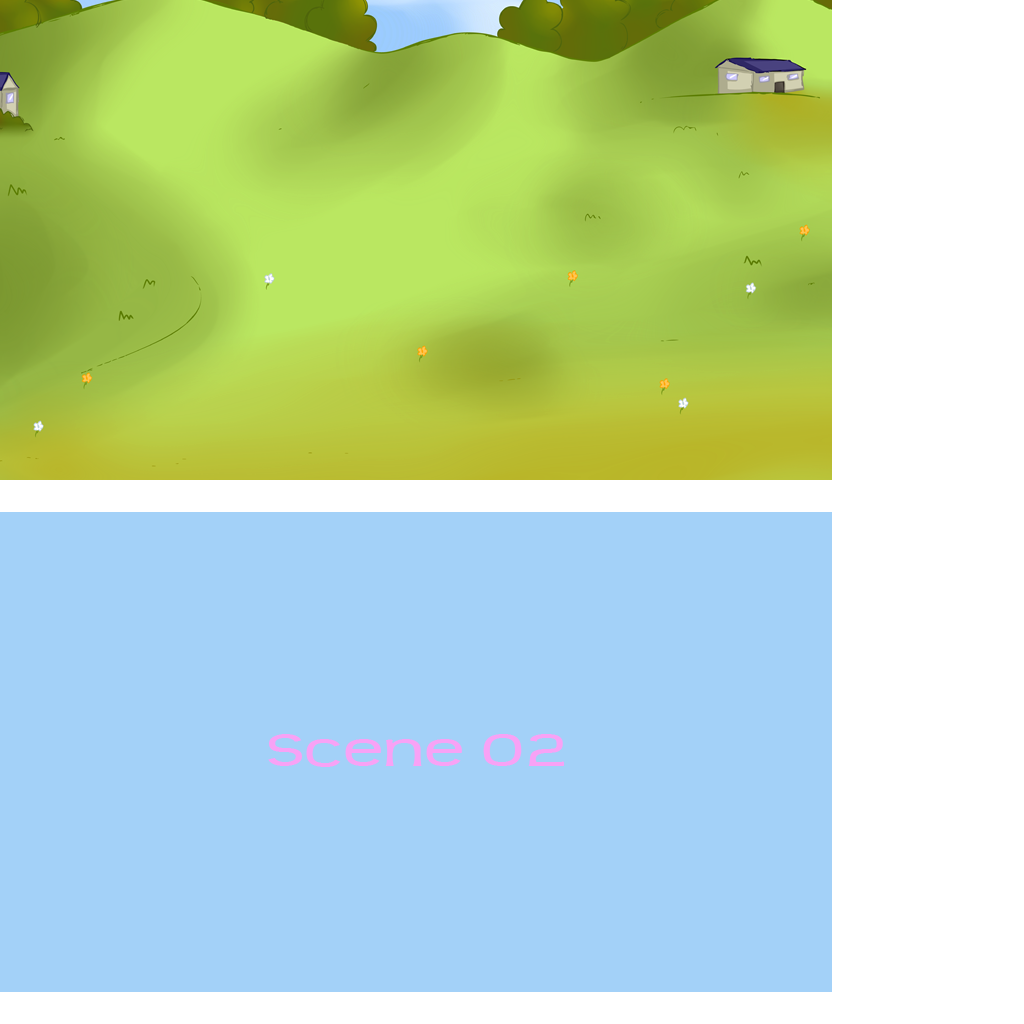
<style>
.page{position:relative;width:1024px;height:1024px;background:#a3d1f8}
.page>*{position:absolute;margin:0}
.t1{font:50.4px "Teen";color:#f8a2f5;scale:1.43 1}
</style>
<div class="page">
<p class="t1" style="left:268px;top:734px;width:297px;height:33px">Scene 02</p>
</div>
